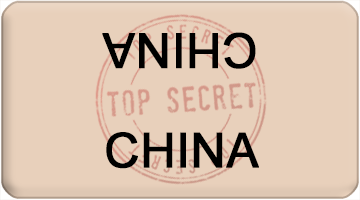
<style>
.page{position:relative;width:360px;height:200px;background:#e8d0bb}
.page>*{position:absolute;margin:0}
.t1{font:48px "ArialMT";color:#000000;font-weight:bold}
</style>
<div class="page">
<p class="t1" style="left:102px;top:32px;width:154px;height:37px;rotate:180deg">CHINA</p>
<p class="t1" style="left:106px;top:132px;width:153px;height:37px">CHINA</p>
</div>
